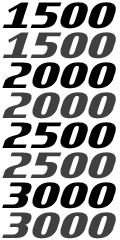
<style>
.page{position:relative;width:120px;height:240px;background:#ffffff}
.page>*{position:absolute;margin:0}
.t1{font:57.6px "Motorwerk";color:#000000}
.t2{font:57.6px "Motorwerk";color:#404040}
</style>
<div class="page">
<p class="t1" style="left:3px;top:2px;width:113px;height:27px">1500</p>
<p class="t2" style="left:3px;top:32px;width:113px;height:27px">1500</p>
<p class="t1" style="left:2px;top:62px;width:114px;height:27px">2000</p>
<p class="t2" style="left:2px;top:92px;width:114px;height:27px">2000</p>
<p class="t1" style="left:2px;top:122px;width:114px;height:27px">2500</p>
<p class="t2" style="left:2px;top:152px;width:114px;height:27px">2500</p>
<p class="t1" style="left:2px;top:182px;width:114px;height:27px">3000</p>
<p class="t2" style="left:2px;top:212px;width:114px;height:27px">3000</p>
</div>
